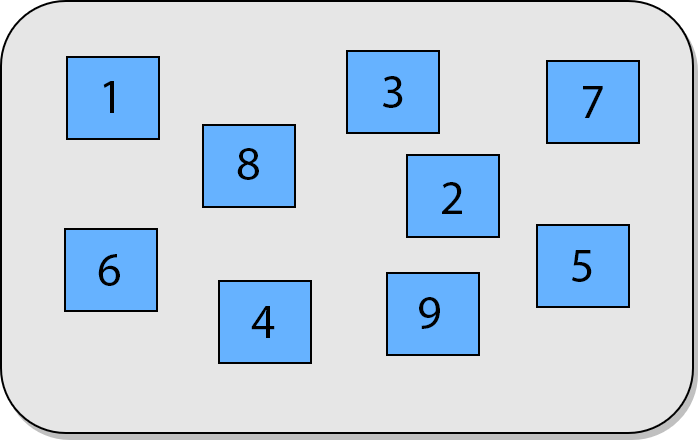
<style>
.page{position:relative;width:698px;height:442px;background:#e6e6e6}
.page>*{position:absolute;margin:0}
.t1{font:48px "MyriadPro-Regular";color:#000000}
</style>
<div class="page">
<p class="t1" style="left:383px;top:76px;width:20px;height:32px">3</p>
<p class="t1" style="left:103px;top:81px;width:11px;height:32px">1</p>
<p class="t1" style="left:583px;top:86px;width:20px;height:32px">7</p>
<p class="t1" style="left:237px;top:148px;width:22px;height:32px">8</p>
<p class="t1" style="left:442px;top:182px;width:20px;height:32px">2</p>
<p class="t1" style="left:98px;top:254px;width:22px;height:32px">6</p>
<p class="t1" style="left:572px;top:250px;width:20px;height:32px">5</p>
<p class="t1" style="left:419px;top:297px;width:21px;height:32px">9</p>
<p class="t1" style="left:251px;top:306px;width:24px;height:32px">4</p>
</div>
